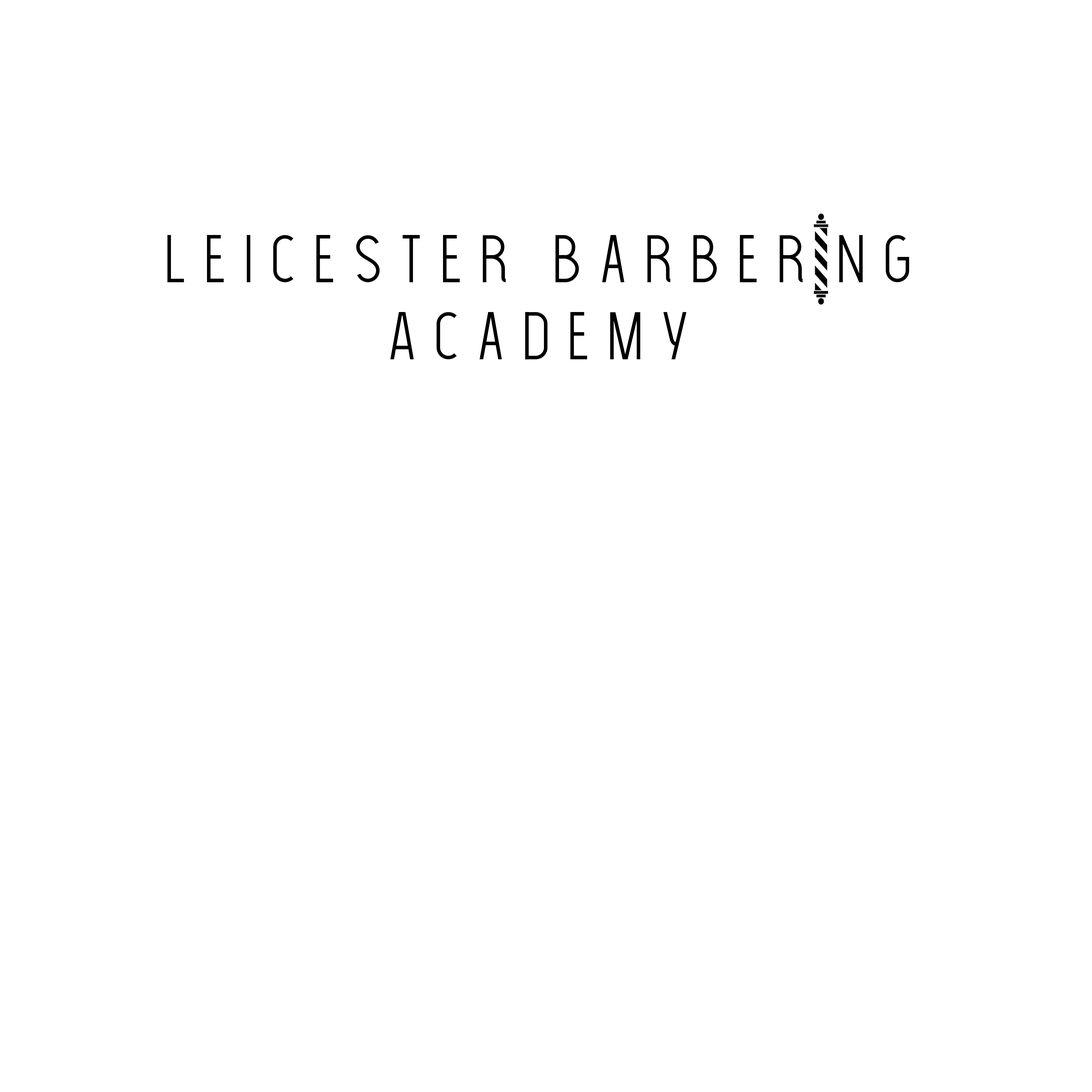
<style>
.page{position:relative;width:1092px;height:1092px;background:#ffffff}
.page>*{position:absolute;margin:0}
.t1{font:64.2px "TheLightFont";color:#000000}
</style>
<div class="page">
<p class="t1" style="left:167px;top:235px;width:742px;height:125px;text-align:center">L e i c e s t e r   b a r b e r  n g<br>A c a d e m y</p>
</div>
